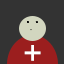
<style>
.page{position:relative;width:64px;height:64px;background:#333333}
.page>*{position:absolute;margin:0}
.t1{font:32.5px "ArialMT";color:#ffffff;font-variant:small-caps}
</style>
<div class="page">
<p class="t1" style="left:24px;top:45px;width:17px;height:16px">+</p>
</div>
